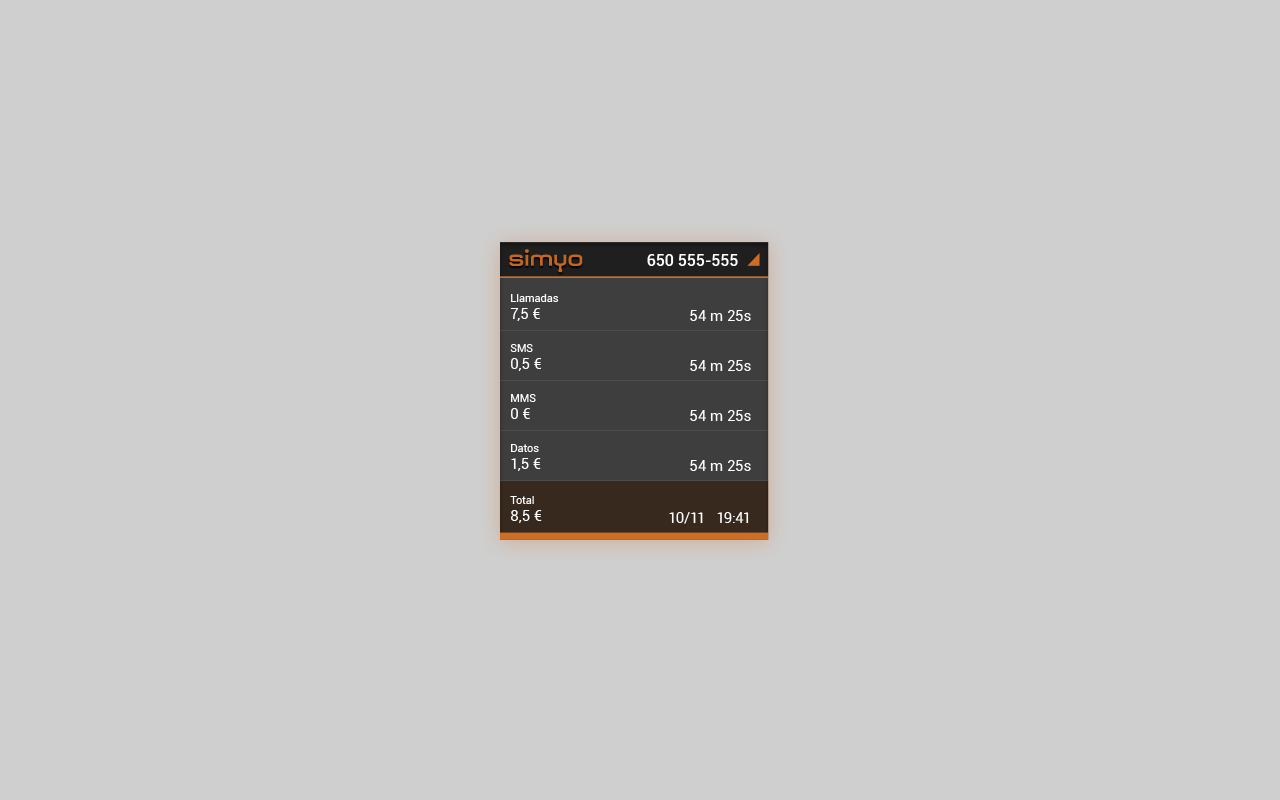
<style>
.page{position:relative;width:1280px;height:800px;background:#cfcfcf}
.page>*{position:absolute;margin:0}
.t1{font:16px "Roboto-Medium";color:#fefefe}
.t2{font:11px/17px "Roboto-Regular";color:#ffffff}
.t3{font:15px/17px "Roboto-Regular";color:#ffffff}
.t4{font:15px "Roboto-Regular";color:#ffffff}
</style>
<div class="page">
<p class="t1" style="left:647px;top:254px;width:91px;height:12px">650 555-555</p>
<p class="t2" style="left:510px;top:294px;width:49px;height:27px">Llamadas<br><span class="t3">7,5 €</span></p>
<p class="t4" style="left:690px;top:310px;width:61px;height:11px">54 m 25s</p>
<p class="t3" style="left:510px;top:344px;width:31px;height:27px"><span class="t2">SMS<br></span>0,5 €</p>
<p class="t4" style="left:690px;top:360px;width:61px;height:11px">54 m 25s</p>
<p class="t2" style="left:511px;top:394px;width:25px;height:25px">MMS<br><span class="t3">0 €</span></p>
<p class="t4" style="left:690px;top:410px;width:61px;height:11px">54 m 25s</p>
<p class="t2" style="left:511px;top:444px;width:30px;height:27px">Datos<br><span class="t3">1,5 €</span></p>
<p class="t4" style="left:690px;top:460px;width:61px;height:11px">54 m 25s</p>
<p class="t2" style="left:510px;top:496px;width:32px;height:27px">Total<br><span class="t3">8,5 €</span></p>
<p class="t4" style="left:669px;top:512px;width:80px;height:12px">10/11   19:41</p>
</div>
